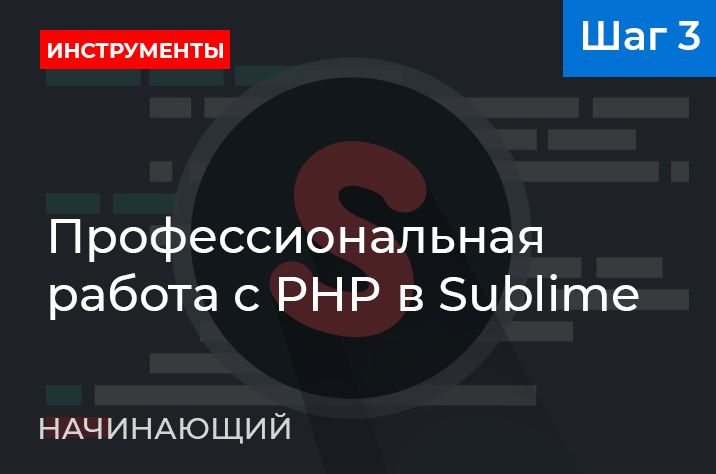
<style>
.page{position:relative;width:716px;height:474px;background:#1e2227}
.page>*{position:absolute;margin:0}
.t1{font:40px "Montserrat-SemiBold";color:#ffffff}
.t2{font:22px "Montserrat-Bold";color:#ffffff;scale:0.95 1}
.t3{font:48px "Montserrat-Medium";color:#ffffff}
.t4{font:30px "Montserrat-Medium";color:#d5d5d5}
</style>
<div class="page">
<p class="t1" style="left:583px;top:21px;width:117px;height:29px">Шаг 3</p>
<p class="t2" style="left:48px;top:43px;width:175px;height:15px">ИНСТРУМЕНТЫ</p>
<p class="t3" style="left:50px;top:216px;width:589px;height:104px">Профессиональная<br>работа с PHP в Sublime</p>
<p class="t4" style="left:40px;top:413px;width:250px;height:31px">НАЧИНАЮЩИЙ</p>
</div>
